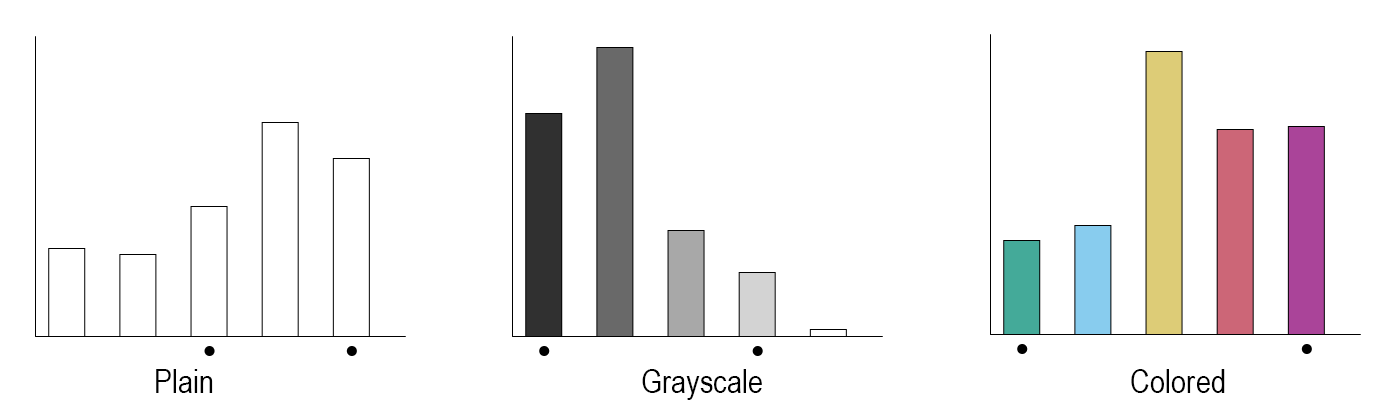
<style>
.page{position:relative;width:1400px;height:400px;background:#ffffff}
.page>*{position:absolute;margin:0}
.t1{font:33.3px "ArialNarrow";color:#000000}
</style>
<div class="page">
<p class="t1" style="left:156px;top:369px;width:57px;height:24px">Plain</p>
<p class="t1" style="left:642px;top:369px;width:120px;height:31px">Grayscale</p>
<p class="t1" style="left:1131px;top:369px;width:94px;height:24px">Colored</p>
</div>
